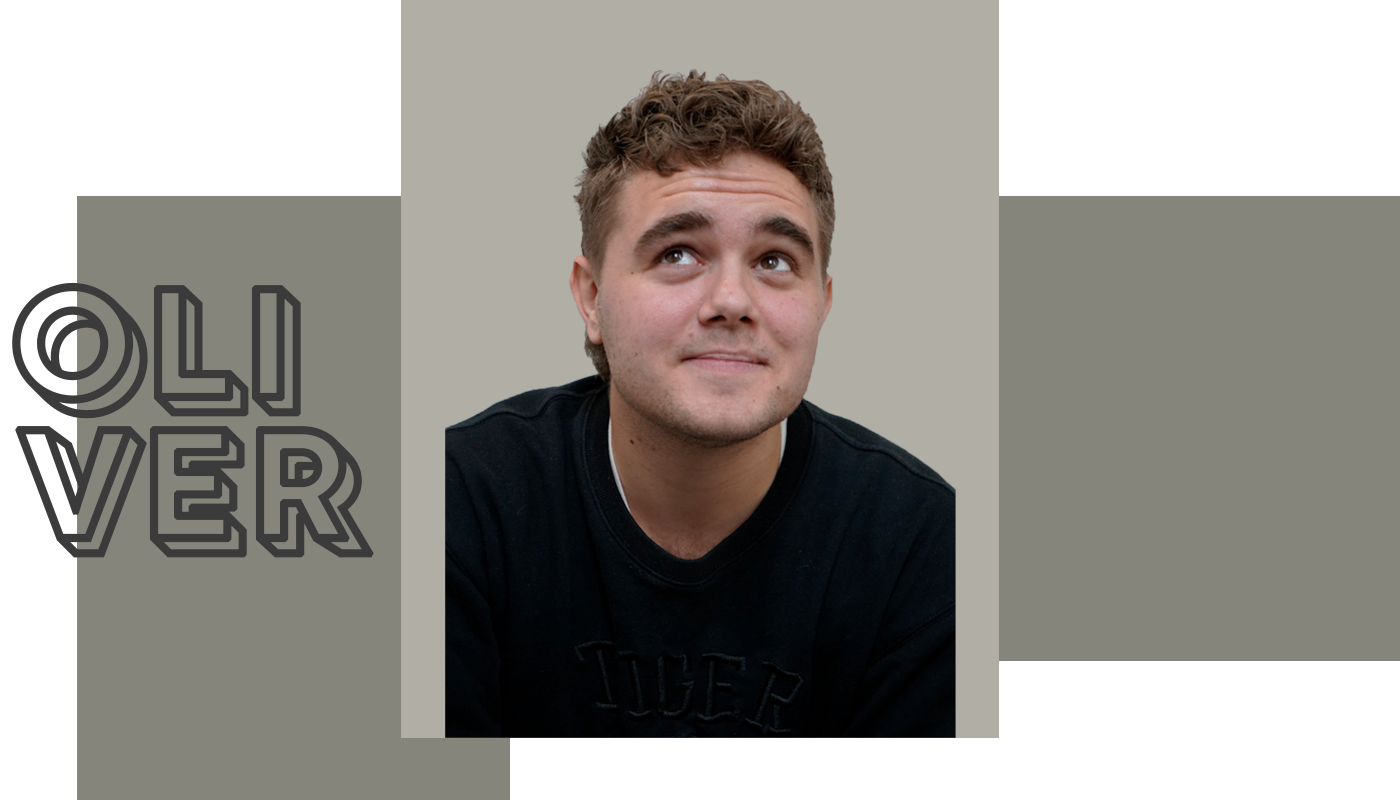
<style>
.page{position:relative;width:1400px;height:800px;background:#86857b}
.page>*{position:absolute;margin:0}
.t1{font:170.9px "Rig-BoldOutline";color:#353535;font-weight:bold}
</style>
<div class="page">
<p class="t1" style="left:12px;top:282px;width:289px;height:137px">OLI</p>
<p class="t1" style="left:15px;top:426px;width:359px;height:132px">VER</p>
</div>
